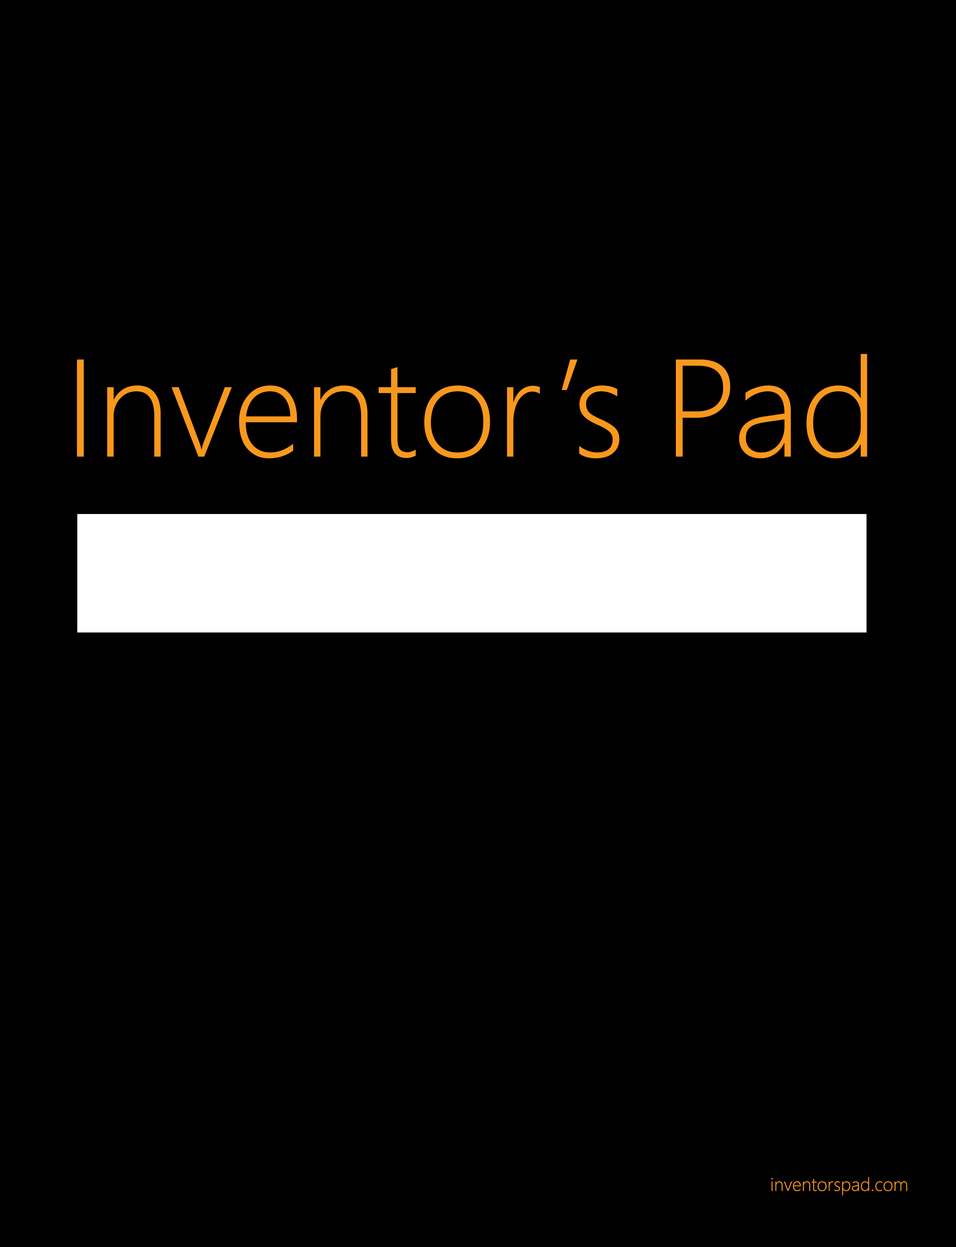
<style>
.page{position:relative;width:956px;height:1247px;background:#000000}
.page>*{position:absolute;margin:0}
.t1{font:138.6px "SegoeUI-Light";color:#f8981d}
.t2{font:18.5px "SegoeUI-Light";color:#f8981d}
</style>
<div class="page">
<p class="t1" style="left:77px;top:354px;width:791px;height:105px">Inventor’s Pad</p>
<p class="t2" style="left:771px;top:1177px;width:136px;height:18px">inventorspad.com</p>
</div>
